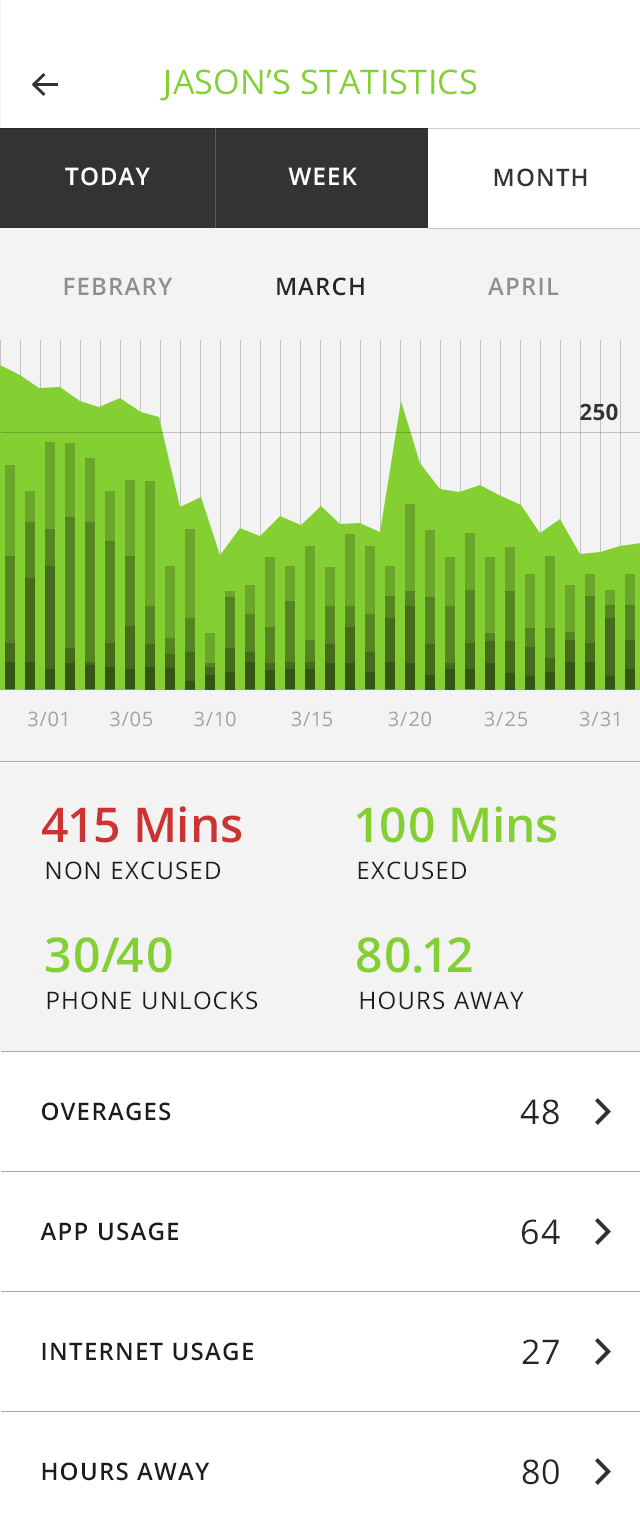
<style>
.page{position:relative;width:640px;height:1532px;background:#ffffff}
.page>*{position:absolute;margin:0}
.t1{font:34px "OpenSans";letter-spacing:0.01em;color:#84d033;text-transform:uppercase}
.t2{font:24px "OpenSans-Semibold";letter-spacing:0.05em;color:#ffffff;text-transform:uppercase}
.t3{font:24px "OpenSans-Semibold";letter-spacing:0.05em;color:#333333;text-transform:uppercase}
.t4{font:24px "OpenSans-Semibold";letter-spacing:0.05em;color:#8f8f8f;text-transform:uppercase}
.t5{font:24px "OpenSans-Semibold";letter-spacing:0.05em;color:#262626;text-transform:uppercase}
.t6{font:22.6px "OpenSans-Bold";letter-spacing:0.01em;color:#333333}
.t7{font:20px "OpenSans";color:#a2a2a2}
.t8{font:48px "OpenSans-Semibold";color:#cc3333}
.t9{font:48px "OpenSans-Semibold";color:#84d033}
.t10{font:24px "OpenSans";letter-spacing:0.05em;color:#1c1c1c;text-transform:uppercase}
.t11{font:24px "OpenSans-Semibold";letter-spacing:0.05em;color:#1c1c1c;text-transform:uppercase}
.t12{font:34px "OpenSans";color:#262626}
</style>
<div class="page">
<p class="t1" style="left:160px;top:69px;width:316px;height:32px">JASON’s Statistics</p>
<p class="t2" style="left:65px;top:167px;width:85px;height:19px">today</p>
<p class="t2" style="left:288px;top:167px;width:69px;height:18px">week</p>
<p class="t3" style="left:494px;top:168px;width:93px;height:19px">month</p>
<p class="t4" style="left:64px;top:277px;width:109px;height:18px">febrary</p>
<p class="t5" style="left:277px;top:277px;width:87px;height:19px">march</p>
<p class="t4" style="left:488px;top:277px;width:71px;height:18px">APRIL</p>
<p class="t6" style="left:580px;top:403px;width:38px;height:18px">250</p>
<p class="t7" style="left:28px;top:711px;width:39px;height:16px">3/01</p>
<p class="t7" style="left:110px;top:711px;width:42px;height:16px">3/05</p>
<p class="t7" style="left:194px;top:711px;width:42px;height:16px">3/10</p>
<p class="t7" style="left:291px;top:711px;width:41px;height:16px">3/15</p>
<p class="t7" style="left:388px;top:711px;width:43px;height:16px">3/20</p>
<p class="t7" style="left:484px;top:711px;width:43px;height:16px">3/25</p>
<p class="t7" style="left:580px;top:711px;width:39px;height:16px">3/31</p>
<p class="t8" style="left:42px;top:806px;width:200px;height:37px">415 Mins</p>
<p class="t9" style="left:356px;top:806px;width:201px;height:37px">100 Mins</p>
<p class="t10" style="left:46px;top:861px;width:174px;height:19px">NON EXCUSED</p>
<p class="t10" style="left:358px;top:861px;width:108px;height:19px">EXCUSED</p>
<p class="t9" style="left:46px;top:937px;width:126px;height:36px">30/40</p>
<p class="t9" style="left:357px;top:937px;width:115px;height:36px">80.12</p>
<p class="t10" style="left:47px;top:991px;width:210px;height:19px">PHONE UNLOCKS</p>
<p class="t10" style="left:360px;top:991px;width:164px;height:19px">Hours AWAY</p>
<p class="t11" style="left:42px;top:1102px;width:129px;height:19px">OVERAGES</p>
<p class="t12" style="left:520px;top:1099px;width:39px;height:26px">48</p>
<p class="t11" style="left:40px;top:1222px;width:138px;height:19px">APP USAGE</p>
<p class="t12" style="left:522px;top:1219px;width:38px;height:26px">64</p>
<p class="t11" style="left:42px;top:1342px;width:211px;height:19px">INTERNET USAGE</p>
<p class="t12" style="left:522px;top:1339px;width:37px;height:25px">27</p>
<p class="t11" style="left:42px;top:1462px;width:168px;height:19px">HOURS AWAY</p>
<p class="t12" style="left:522px;top:1459px;width:37px;height:26px">80</p>
</div>
